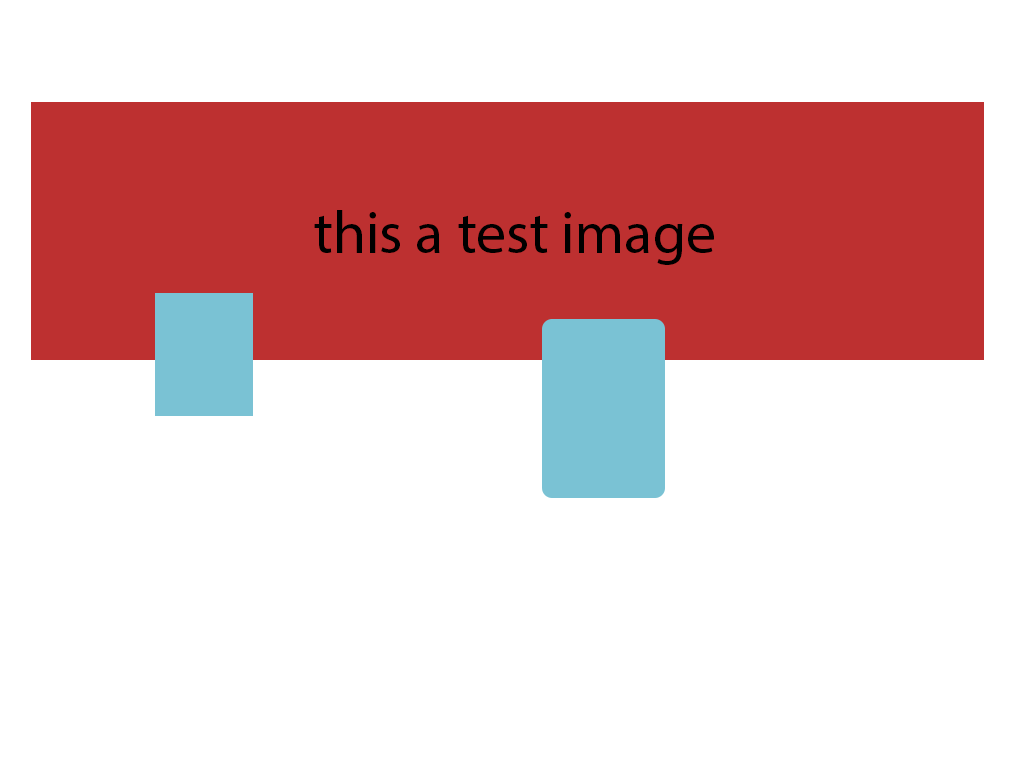
<style>
.page{position:relative;width:1024px;height:768px;background:#ffffff}
.page>*{position:absolute;margin:0}
.t1{font:59.3px "MyriadPro-Regular";color:#000000}
</style>
<div class="page">
<p class="t1" style="left:314px;top:210px;width:400px;height:55px">this a test image</p>
</div>
